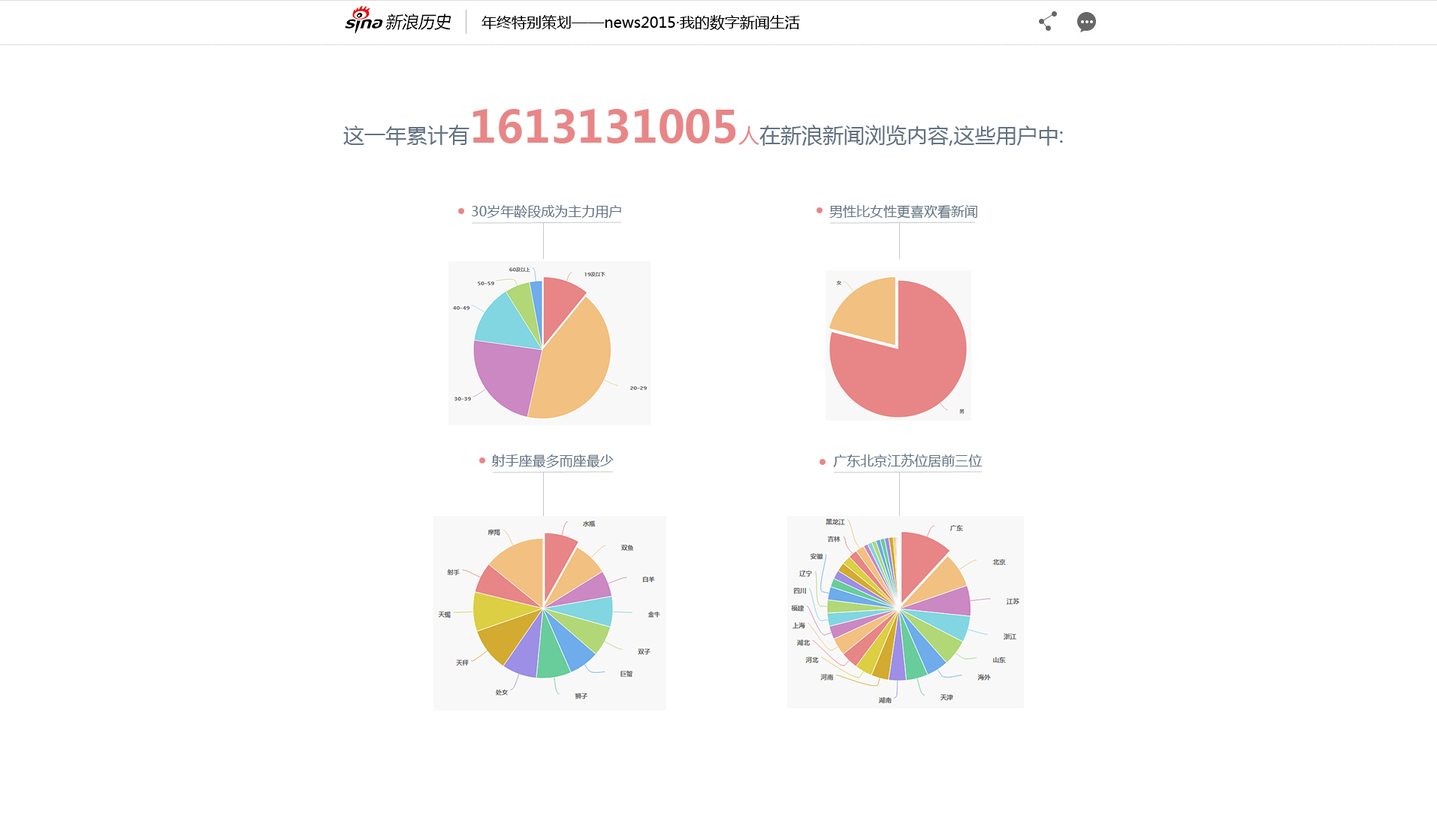
<style>
.page{position:relative;width:1437px;height:830px;background:#ffffff}
.page>*{position:absolute;margin:0}
.t1{font:15px "MicrosoftYaHei";color:#000000}
.t2{font:21px "MicrosoftYaHei";color:#637282}
.t3{font:43.6px "MicrosoftYaHei-Bold";color:#e88687}
.t4{font:21px "MicrosoftYaHei";color:#e88687}
.t5{font:13.5px "MicrosoftYaHei";color:#637282}
</style>
<div class="page">
<p class="t1" style="left:481px;top:15px;width:319px;height:15px">年终特别策划——news2015·我的数字新闻生活</p>
<p class="t2" style="left:343px;top:109px;width:720px;height:37px">这一年累计有<span class="t3">1613131005</span><span class="t4">人</span>在新浪新闻浏览内容,这些用户中:</p>
<p class="t5" style="left:472px;top:205px;width:149px;height:13px">30岁年龄段成为主力用户</p>
<p class="t5" style="left:829px;top:205px;width:148px;height:14px">男性比女性更喜欢看新闻</p>
<p class="t5" style="left:491px;top:454px;width:123px;height:14px">射手座最多而座最少</p>
<p class="t5" style="left:833px;top:454px;width:149px;height:13px">广东北京江苏位居前三位</p>
</div>
